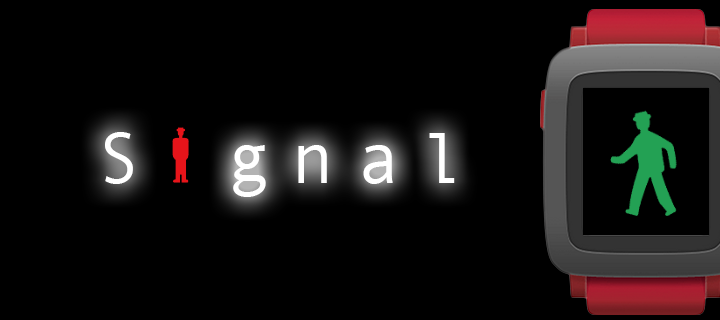
<style>
.page{position:relative;width:720px;height:320px;background:#000000}
.page>*{position:absolute;margin:0}
.t1{font:72px "AndaleMono";letter-spacing:0.3em;color:#ffffff}
</style>
<div class="page">
<p class="t1" style="left:105px;top:132px;width:350px;height:65px">S gnal</p>
</div>
